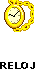
<style>
.page{position:relative;width:36px;height:69px;background:#ffffff}
.page>*{position:absolute;margin:0}
.t1{font:10.3px "Arial-BoldMT";color:#000000;scale:1.11 1}
</style>
<div class="page">
<p class="t1" style="left:0px;top:62px;width:35px;height:7px">RELOJ</p>
</div>
